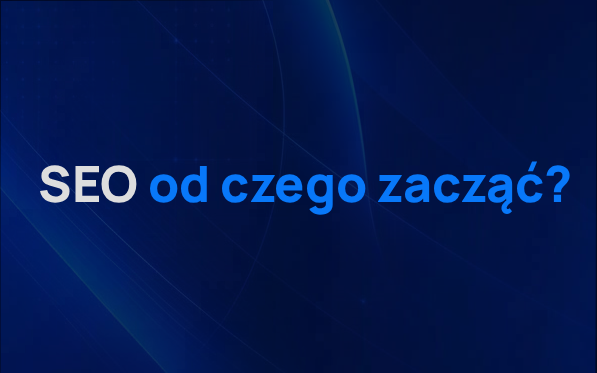
<style>
.page{position:relative;width:597px;height:373px}
.page>*{position:absolute;margin:0}
.t1{font:50px "Manrope-ExtraBold";color:#0878f9}
.t2{font:50px "Manrope-ExtraBold";color:#dddddd}
</style>
<div class="page">
<p class="t1" style="left:40px;top:161px;width:530px;height:54px"><span class="t2">SEO </span>od czego zacząć?</p>
</div>
